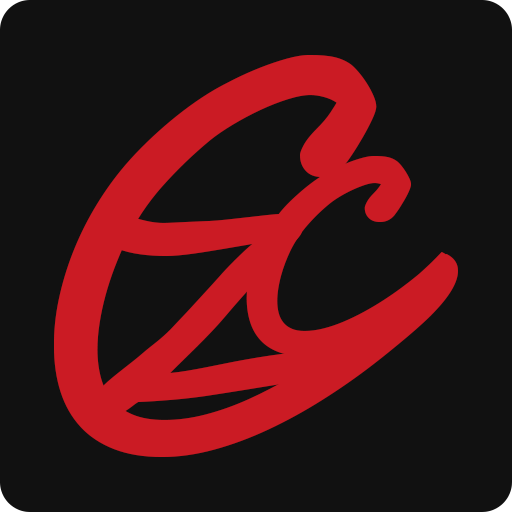
<style>
.page{position:relative;width:512px;height:512px;background:#111111}
.page>*{position:absolute;margin:0}
.t1{font:520px "SegoeScript";color:#cb1b24}
.t2{font:260px "SegoeScript-Bold";color:#cb1b24}
.t3{font:300px "SegoeScript-Bold";color:#cb1b24}
</style>
<div class="page">
<p class="t1" style="left:54px;top:55px;width:404px;height:402px">C</p>
<p class="t2" style="left:246px;top:156px;width:205px;height:200px">C</p>
<p class="t3" style="left:95px;top:214px;width:255px;height:202px">Z</p>
</div>
